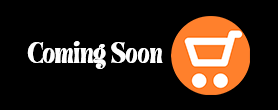
<style>
.page{position:relative;width:278px;height:110px;background:#000000}
.page>*{position:absolute;margin:0}
.t1{font:23px "BrasikaDisplayTrial-Regular";color:#fefefe;scale:0.85 1}
</style>
<div class="page">
<p class="t1" style="left:27px;top:41px;width:136px;height:28px">Coming Soon</p>
</div>
